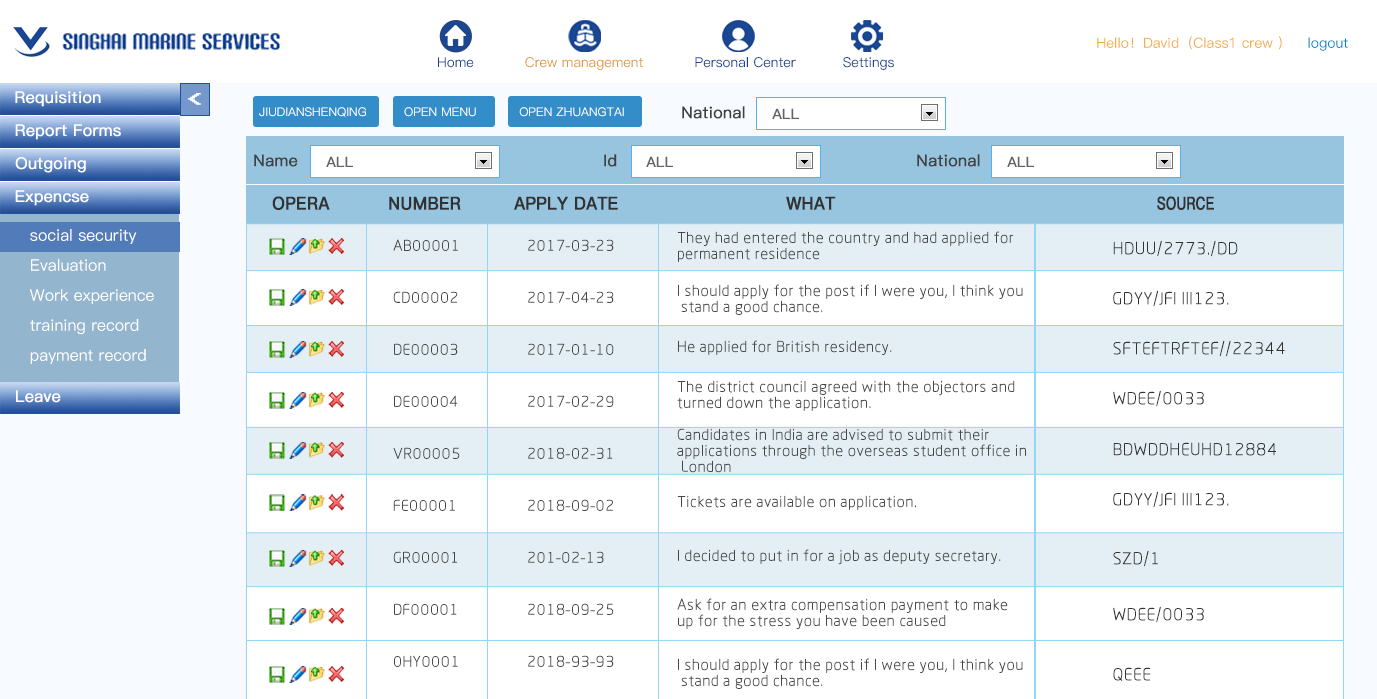
<style>
.page{position:relative;width:1377px;height:699px;background:#ffffff}
.page>*{position:absolute;margin:0}
.t1{font:14px "PingFang-SC-Medium";color:#f3ac47}
.t2{font:14px "PingFang-SC-Medium";color:#0088cc}
.t3{font:13.7px "PingFang-SC-Medium";color:#1a4692}
.t4{font:13.7px "PingFang-SC-Medium";color:#e29b3a}
.t5{font:16px "PingFang-SC-Medium";color:#ffffff;font-weight:bold}
.t6{font:20.5px "Terminal";color:#ffffff;font-weight:bold;scale:1.22 1}
.t7{font:12px "PingFang-SC-Medium";color:#ffffff}
.t8{font:16px "PingFang-SC-Medium";color:#414141;font-weight:bold}
.t9{font:14px "PingFang-SC-Medium";color:#636363;font-weight:bold}
.t10{font:18px "PingFang-SC-Bold";color:#323232;font-weight:bold;scale:0.9 1}
.t11{font:18px "PingFang-SC-Bold";color:#323232;font-weight:bold;scale:0.89 1}
.t12{font:18px "PingFang-SC-Bold";color:#323232;font-weight:bold;scale:0.73 1}
.t13{font:16px/30px "PingFang-SC-Medium";color:#ffffff}
.t14{font:16px/16px "RTWSYueRoudGoDemo-Regular";color:#474747}
.t15{font:18px "RTWSYueRoudGoDemo-Regular";color:#323232}
.t16{font:16px "RTWSYueRoudGoDemo-Regular";color:#474747}
</style>
<div class="page">
<p class="t1" style="left:1097px;top:36px;width:185px;height:14px">Hello！David（Class1 crew ）</p>
<p class="t2" style="left:1308px;top:37px;width:40px;height:14px">logout</p>
<p class="t3" style="left:438px;top:57px;width:36px;height:11px">Home</p>
<p class="t4" style="left:525px;top:57px;width:118px;height:13px">Crew management</p>
<p class="t3" style="left:695px;top:57px;width:101px;height:11px">Personal Center</p>
<p class="t3" style="left:843px;top:57px;width:51px;height:13px">Settings</p>
<p class="t5" style="left:15px;top:91px;width:86px;height:16px">Requisition</p>
<p class="t6" style="left:188px;top:93px;width:13px;height:12px;rotate:180deg">&gt;</p>
<p class="t7" style="left:259px;top:107px;width:107px;height:10px">JIUDIANSHENQING</p>
<p class="t7" style="left:404px;top:107px;width:72px;height:10px">OPEN MENU</p>
<p class="t7" style="left:519px;top:107px;width:105px;height:10px">OPEN ZHUANGTAI</p>
<p class="t8" style="left:682px;top:106px;width:63px;height:13px">National</p>
<p class="t9" style="left:772px;top:108px;width:27px;height:11px">ALL</p>
<p class="t5" style="left:15px;top:124px;width:106px;height:16px">Report Forms</p>
<p class="t5" style="left:15px;top:157px;width:71px;height:16px">Outgoing</p>
<p class="t8" style="left:254px;top:154px;width:44px;height:13px">Name</p>
<p class="t9" style="left:326px;top:156px;width:27px;height:11px">ALL</p>
<p class="t8" style="left:604px;top:154px;width:13px;height:13px">Id</p>
<p class="t9" style="left:646px;top:156px;width:27px;height:11px">ALL</p>
<p class="t8" style="left:917px;top:154px;width:63px;height:13px">National</p>
<p class="t9" style="left:1007px;top:156px;width:27px;height:11px">ALL</p>
<p class="t5" style="left:15px;top:190px;width:74px;height:16px">Expencse</p>
<p class="t10" style="left:272px;top:196px;width:58px;height:14px">OPERA</p>
<p class="t10" style="left:389px;top:196px;width:72px;height:14px">NUMBER</p>
<p class="t11" style="left:514px;top:196px;width:104px;height:14px">APPLY DATE</p>
<p class="t11" style="left:786px;top:196px;width:50px;height:14px">WHAT</p>
<p class="t12" style="left:1157px;top:196px;width:57px;height:14px">SOURCE</p>
<p class="t13" style="left:29px;top:229px;width:125px;height:135px">social security<br>Evaluation<br>Work experience<br>training record<br>payment record</p>
<p class="t14" style="left:677px;top:231px;width:337px;height:31px">They had entered the country and had applied for <br>permanent residence</p>
<p class="t15" style="left:1113px;top:240px;width:125px;height:17px">HDUU/2773./DD</p>
<p class="t14" style="left:678px;top:284px;width:345px;height:31px">I should apply for the post if I were you, I think you<br> stand a good chance.</p>
<p class="t15" style="left:1113px;top:290px;width:116px;height:17px">GDYY/JFI III123.</p>
<p class="t16" style="left:678px;top:340px;width:214px;height:15px">He applied for British residency.</p>
<p class="t15" style="left:1113px;top:340px;width:172px;height:17px">SFTEFTRFTEF//22344</p>
<p class="t5" style="left:16px;top:390px;width:45px;height:13px">Leave</p>
<p class="t14" style="left:677px;top:380px;width:338px;height:31px">The district council agreed with the objectors and <br>turned down the application.</p>
<p class="t15" style="left:1113px;top:390px;width:91px;height:17px">WDEE/0033</p>
<p class="t14" style="left:677px;top:428px;width:349px;height:45px">Candidates in India are advised to submit their <br>applications through the overseas student office in <br> London</p>
<p class="t15" style="left:1113px;top:442px;width:164px;height:14px">BDWDDHEUHD12884</p>
<p class="t16" style="left:677px;top:495px;width:239px;height:15px">Tickets are available on application.</p>
<p class="t15" style="left:1113px;top:491px;width:116px;height:17px">GDYY/JFI III123.</p>
<p class="t16" style="left:678px;top:549px;width:323px;height:16px">I decided to put in for a job as deputy secretary.</p>
<p class="t15" style="left:1113px;top:550px;width:45px;height:17px">SZD/1</p>
<p class="t14" style="left:677px;top:598px;width:331px;height:31px">Ask for an extra compensation payment to make <br>up for the stress you have been caused</p>
<p class="t15" style="left:1113px;top:606px;width:91px;height:17px">WDEE/0033</p>
<p class="t14" style="left:678px;top:658px;width:345px;height:31px">I should apply for the post if I were you, I think you<br> stand a good chance.</p>
<p class="t15" style="left:1113px;top:667px;width:38px;height:14px">QEEE</p>
</div>
